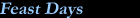
<style>
.page{position:relative;width:140px;height:18px;background:#000000}
.page>*{position:absolute;margin:0}
.t1{font:18px "Garamond-Bold";color:#99ccff;font-style:italic}
</style>
<div class="page">
<p class="t1" style="left:0px;top:2px;width:83px;height:17px">Feast Days</p>
</div>
